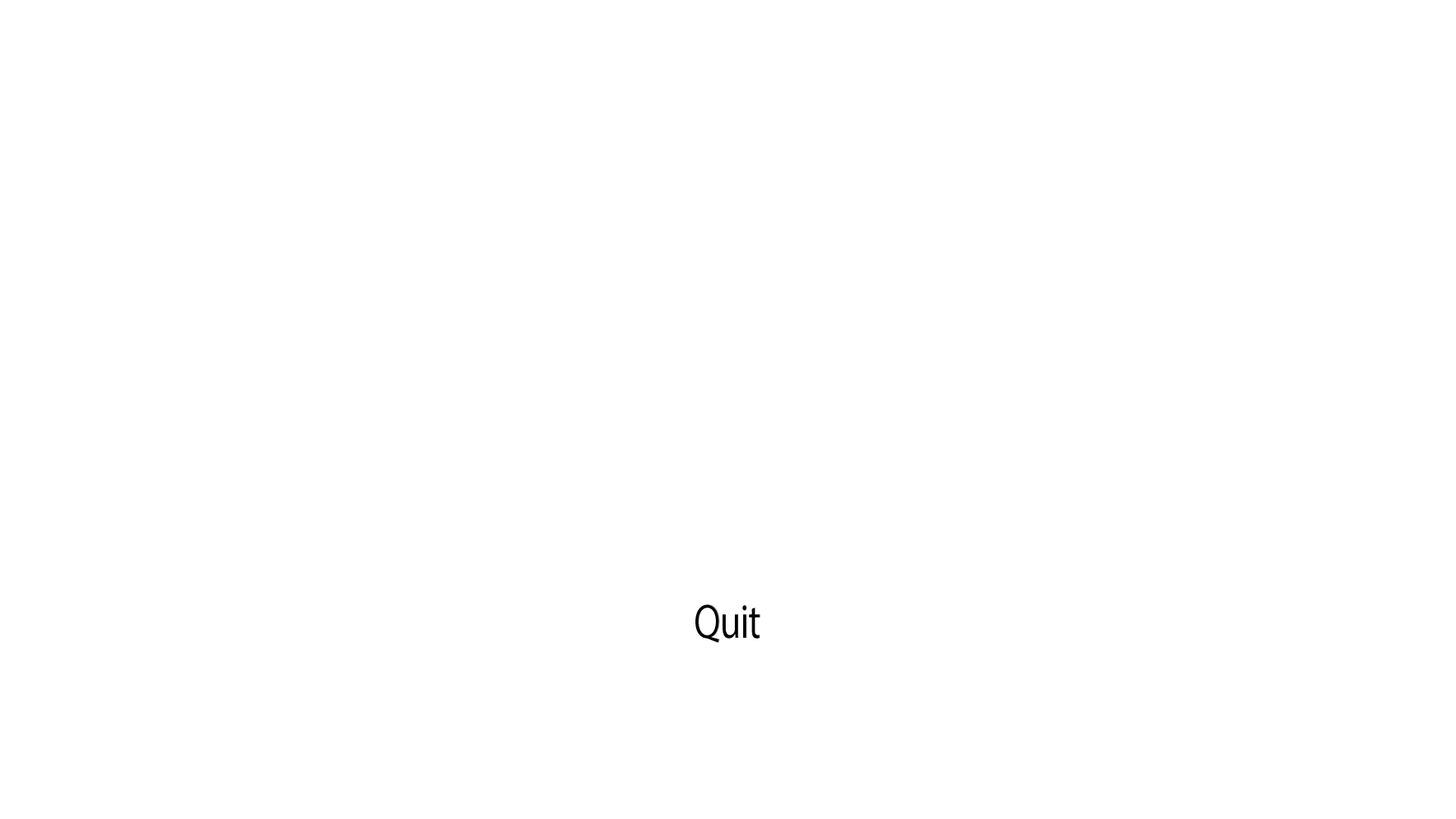
<style>
.page{position:relative;width:1456px;height:819px;background:#ffffff}
.page>*{position:absolute;margin:0}
.t1{font:48.8px "MyriadPro-Regular";letter-spacing:-0.025em;color:#000000;scale:0.8 1}
</style>
<div class="page">
<p class="t1" style="left:695px;top:604px;width:66px;height:39px">Quit</p>
</div>
